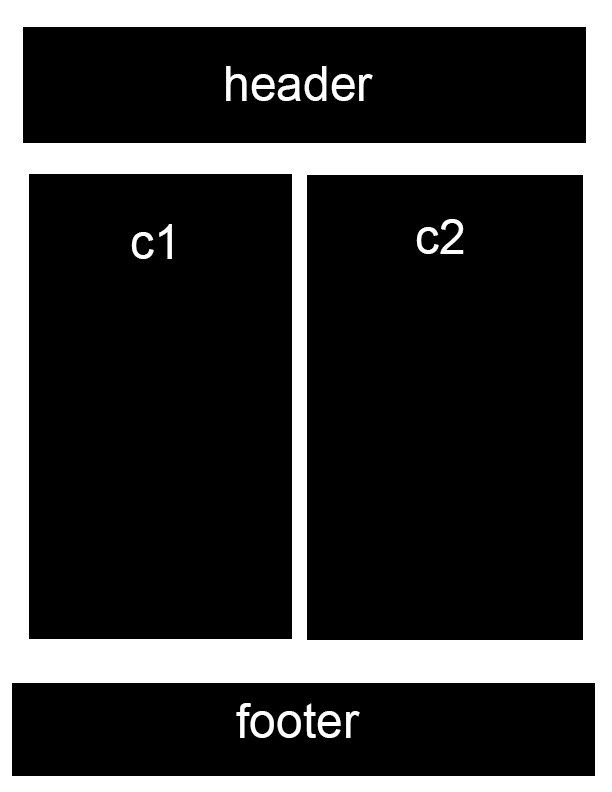
<style>
.page{position:relative;width:612px;height:792px;background:#000000}
.page>*{position:absolute;margin:0}
.t1{font:48px "ArialMT";color:#ffffff}
</style>
<div class="page">
<p class="t1" style="left:226px;top:66px;width:147px;height:35px">header</p>
<p class="t1" style="left:416px;top:219px;width:48px;height:35px">c2</p>
<p class="t1" style="left:131px;top:224px;width:41px;height:35px">c1</p>
<p class="t1" style="left:236px;top:703px;width:124px;height:35px">footer</p>
</div>
